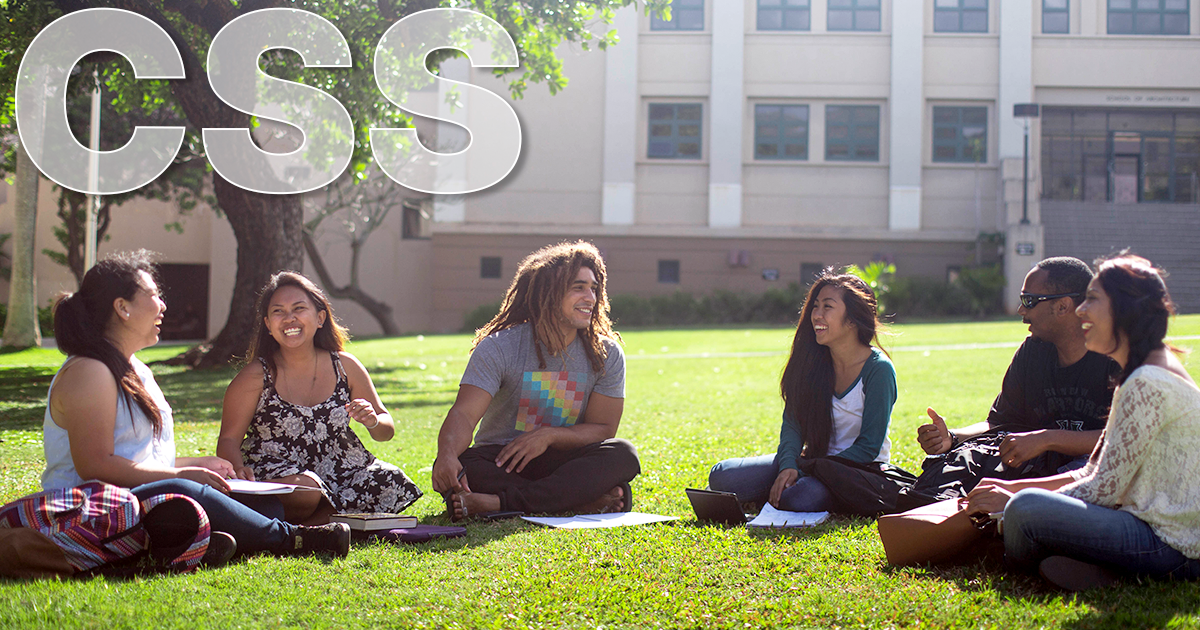
<style>
.page{position:relative;width:1200px;height:630px}
.page>*{position:absolute;margin:0}
.t1{font:250px "Inter-Black"}
</style>
<div class="page">
<p class="t1" style="left:15px;top:7px;width:507px;height:188px">CSS</p>
</div>
